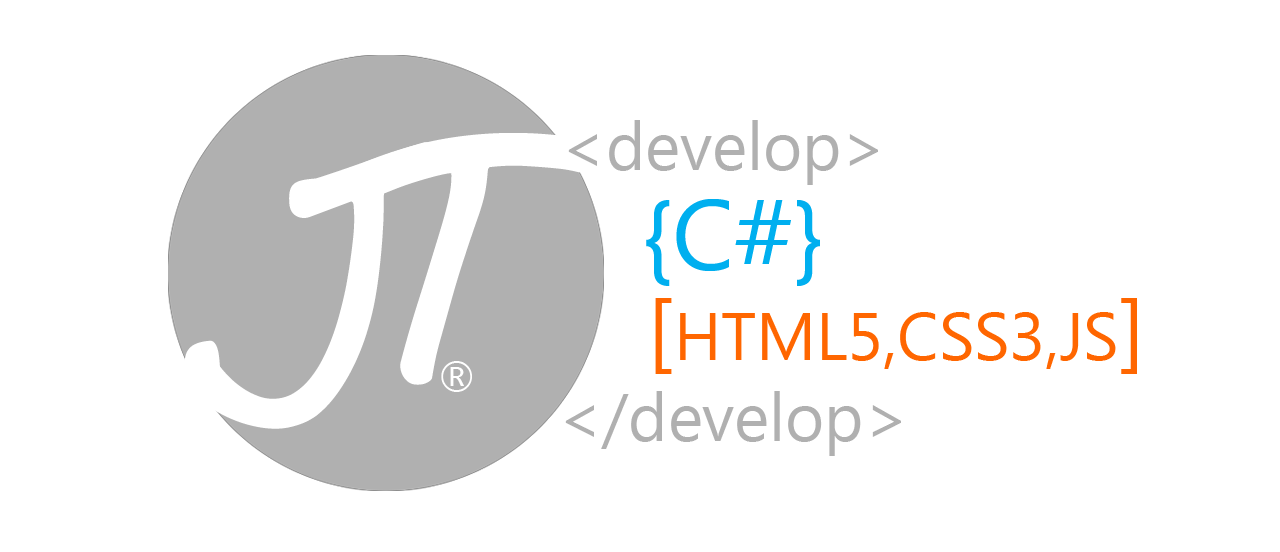
<style>
.page{position:relative;width:1280px;height:552px;background:#ffffff}
.page>*{position:absolute;margin:0}
.t1{font:66.7px "SegoeUISymbol";color:#b0b0b0}
.t2{font:100.2px "SegoeUISymbol";color:#00afef}
.t3{font:66.6px "SegoeUISymbol";color:#ff6600}
.t4{font:88.2px "SegoeUISymbol";color:#ff6600}
</style>
<div class="page">
<p class="t1" style="left:568px;top:120px;width:310px;height:65px">&lt;develop&gt;</p>
<p class="t2" style="left:646px;top:199px;width:174px;height:87px">{C#}</p>
<p class="t3" style="left:655px;top:298px;width:482px;height:76px"><span class="t4">[</span>HTML5,CSS3,JS<span class="t4">]</span></p>
<p class="t1" style="left:565px;top:391px;width:336px;height:65px">&lt;/develop&gt;</p>
</div>
